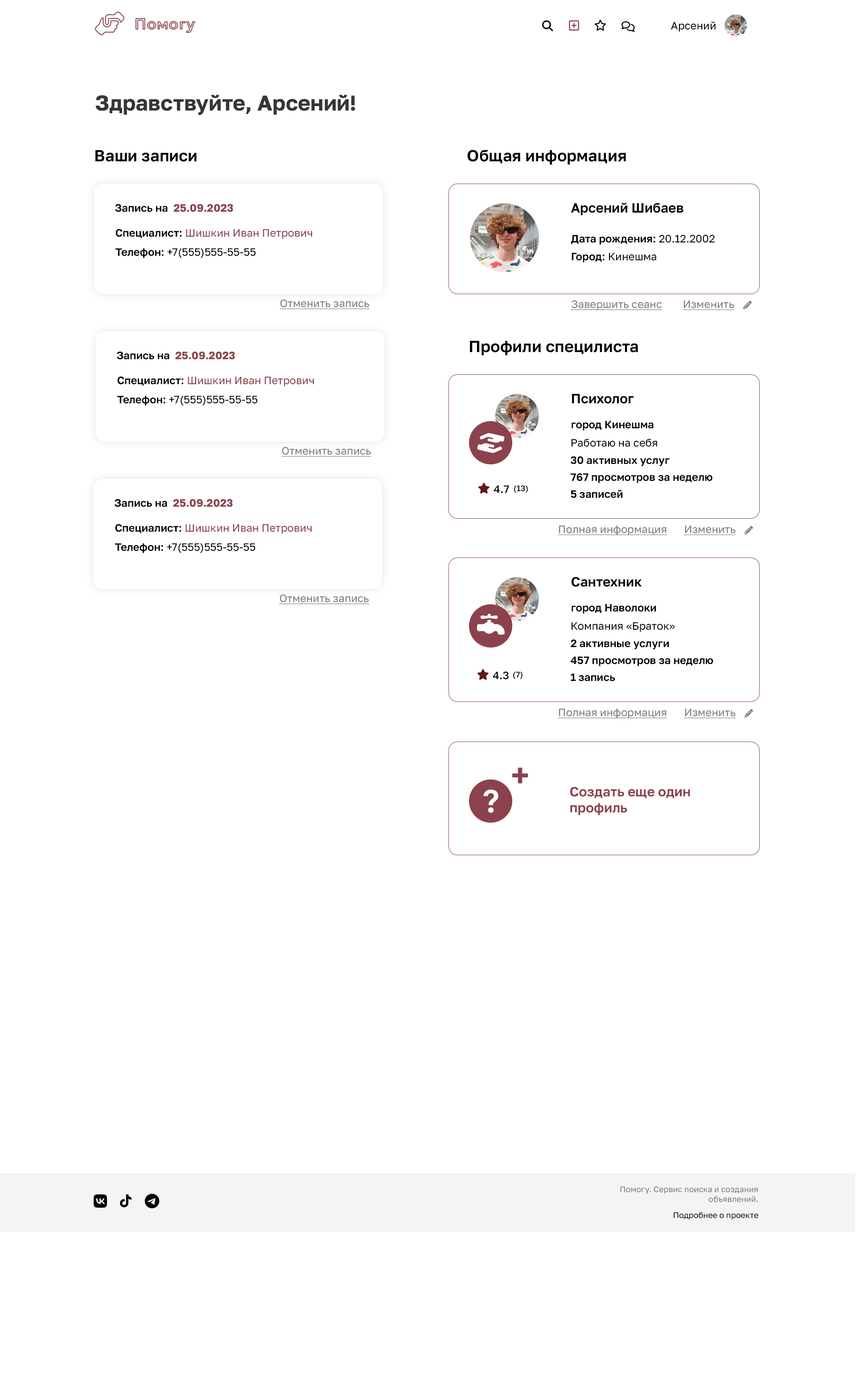
<style>
.page{position:relative;width:856px;height:1394px;background:#ffffff}
.page>*{position:absolute;margin:0}
.t1{font:16px "Geologica-Bold"}
.t2{font:10.7px "GolosText-Regular";color:#000000}
.t3{font:21.4px "GolosText-Bold";color:#363636}
.t4{font:16px "GolosText-SemiBold";color:#020202}
.t5{font:10.7px "GolosText-Bold";color:#8b424c}
.t6{font:10.7px "GolosText-SemiBold";color:#020202}
.t7{font:13.4px "GolosText-SemiBold";color:#020202}
.t8{font:10.7px "GolosText-Regular";color:#8b424c}
.t9{font:10.7px "GolosText-Regular";color:#020202}
.t10{font:10.7px "GolosText-Regular";color:#7c7c7c;text-decoration:underline}
.t11{font:10.7px "GolosText-Medium";color:#000000}
.t12{font:8px "GolosText-Medium";color:#000000}
.t13{font:32.1px "GolosText-SemiBold";color:#8b424c}
.t14{font:32.1px "GolosText-SemiBold";color:#ffffff}
.t15{font:13.4px "GolosText-SemiBold";color:#8b424c}
.t16{font:8px "GolosText-Regular";color:#7c7c7c}
.t17{font:8px "GolosText-Regular";color:#000000}
</style>
<div class="page">
<p class="t1" style="left:135px;top:18px;width:60px;height:15px">Помогу</p>
<p class="t2" style="left:671px;top:21px;width:44px;height:11px">Арсений</p>
<p class="t3" style="left:95px;top:94px;width:260px;height:21px">Здравствуйте, Арсений!</p>
<p class="t4" style="left:95px;top:150px;width:102px;height:12px">Ваши записи</p>
<p class="t4" style="left:467px;top:150px;width:159px;height:15px">Общая информация</p>
<p class="t5" style="left:115px;top:204px;width:118px;height:8px"><span class="t6">Запись на  </span>25.09.2023</p>
<p class="t7" style="left:570px;top:203px;width:113px;height:12px">Арсений Шибаев</p>
<p class="t8" style="left:115px;top:229px;width:197px;height:10px"><span class="t6">Специалист: </span>Шишкин Иван Петрович</p>
<p class="t6" style="left:571px;top:234px;width:143px;height:11px">Дата рождения:<span class="t9"> 20.12.2002</span></p>
<p class="t9" style="left:115px;top:248px;width:141px;height:10px"><span class="t6">Телефон:</span> +7(555)555-55-55</p>
<p class="t9" style="left:571px;top:253px;width:85px;height:9px"><span class="t6">Город:</span> Кинешма</p>
<p class="t10" style="left:279px;top:299px;width:90px;height:10px">Отменить запись</p>
<p class="t10" style="left:571px;top:300px;width:91px;height:10px">Завершить сеанс</p>
<p class="t10" style="left:682px;top:300px;width:52px;height:10px">Изменить</p>
<p class="t4" style="left:470px;top:340px;width:168px;height:16px">Профили специлиста</p>
<p class="t5" style="left:117px;top:352px;width:118px;height:8px"><span class="t6">Запись на  </span>25.09.2023</p>
<p class="t8" style="left:117px;top:377px;width:197px;height:9px"><span class="t6">Специалист: </span>Шишкин Иван Петрович</p>
<p class="t9" style="left:117px;top:396px;width:141px;height:9px"><span class="t6">Телефон:</span> +7(555)555-55-55</p>
<p class="t7" style="left:572px;top:394px;width:62px;height:10px">Психолог</p>
<p class="t6" style="left:571px;top:421px;width:82px;height:9px">город Кинешма</p>
<p class="t10" style="left:281px;top:446px;width:90px;height:11px">Отменить запись</p>
<p class="t9" style="left:571px;top:438px;width:86px;height:9px">Работаю на себя</p>
<p class="t6" style="left:570px;top:456px;width:99px;height:10px">30 активных услуг</p>
<p class="t6" style="left:570px;top:473px;width:142px;height:10px">767 просмотров за неделю</p>
<p class="t11" style="left:493px;top:485px;width:16px;height:8px">4.7</p>
<p class="t12" style="left:514px;top:485px;width:14px;height:8px">(13)</p>
<p class="t6" style="left:570px;top:490px;width:52px;height:8px">5 записей</p>
<p class="t5" style="left:115px;top:499px;width:118px;height:8px"><span class="t6">Запись на  </span>25.09.2023</p>
<p class="t8" style="left:115px;top:524px;width:197px;height:10px"><span class="t6">Специалист: </span>Шишкин Иван Петрович</p>
<p class="t10" style="left:557px;top:525px;width:110px;height:10px">Полная информация</p>
<p class="t10" style="left:684px;top:525px;width:52px;height:10px">Изменить</p>
<p class="t9" style="left:115px;top:543px;width:140px;height:10px"><span class="t6">Телефон:</span> +7(555)555-55-55</p>
<p class="t7" style="left:571px;top:577px;width:71px;height:10px">Сантехник</p>
<p class="t10" style="left:279px;top:594px;width:90px;height:10px">Отменить запись</p>
<p class="t6" style="left:571px;top:604px;width:85px;height:10px">город Наволоки</p>
<p class="t9" style="left:571px;top:622px;width:104px;height:10px">Компания «Браток»</p>
<p class="t6" style="left:570px;top:639px;width:99px;height:10px">2 активные услуги</p>
<p class="t6" style="left:570px;top:656px;width:143px;height:10px">457 просмотров за неделю</p>
<p class="t11" style="left:492px;top:672px;width:16px;height:8px">4.3</p>
<p class="t12" style="left:513px;top:672px;width:9px;height:7px">(7)</p>
<p class="t6" style="left:570px;top:673px;width:45px;height:8px">1 запись</p>
<p class="t10" style="left:557px;top:708px;width:110px;height:10px">Полная информация</p>
<p class="t10" style="left:684px;top:708px;width:52px;height:10px">Изменить</p>
<p class="t13" style="left:512px;top:767px;width:16px;height:16px">+</p>
<p class="t14" style="left:483px;top:789px;width:15px;height:24px">?</p>
<p class="t15" style="left:570px;top:786px;width:120px;height:29px">Создать еще один<br>профиль</p>
<p class="t16" style="left:620px;top:1186px;width:137px;height:16px;text-align:right">Помогу. Сервис поиска и создания<br>объявлений.</p>
<p class="t17" style="left:673px;top:1212px;width:85px;height:8px">Подробнее о проекте</p>
</div>
